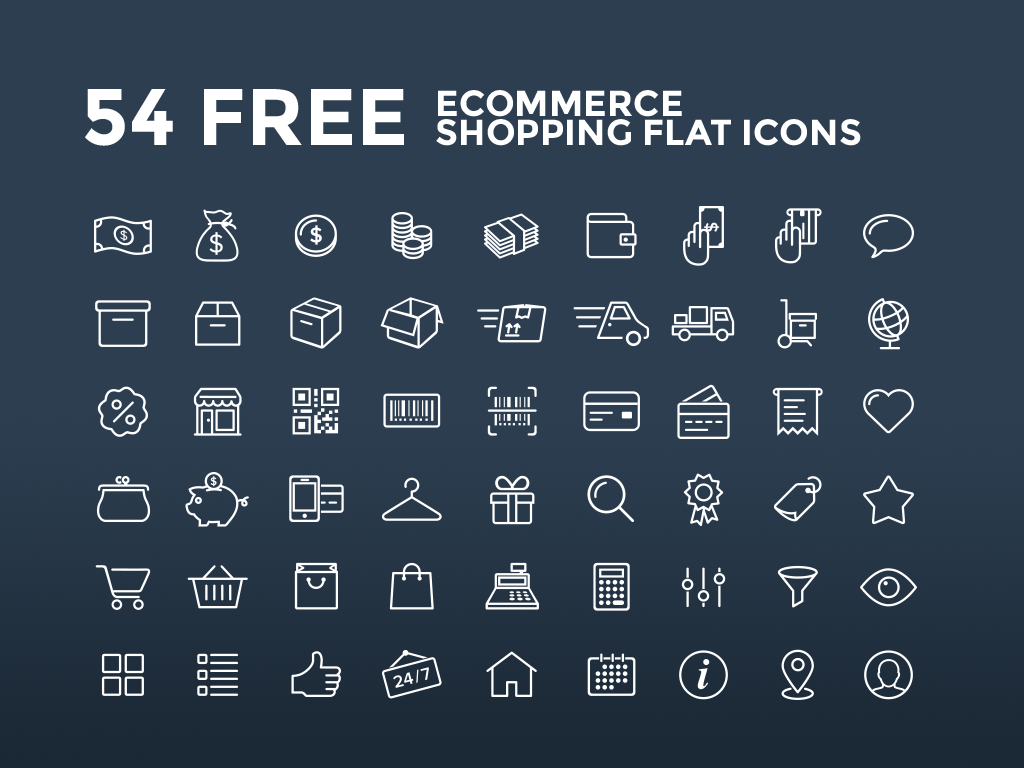
<style>
.page{position:relative;width:1024px;height:768px;background:#2c3e50}
.page>*{position:absolute;margin:0}
.t1{font:80px "Montserrat-Bold";color:#ffffff}
.t2{font:36.3px/21.8px "Montserrat-Bold";color:#ffffff}
</style>
<div class="page">
<p class="t1" style="left:85px;top:89px;width:319px;height:57px">54 FREE</p>
<p class="t2" style="left:436px;top:90px;width:425px;height:56px">ECOMMERCE <br>SHOPPING FLAT ICONS</p>
</div>
